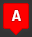
<style>
.page{position:relative;width:32px;height:37px;background:#ff0000}
.page>*{position:absolute;margin:0}
.t1{font:14.6px "Barlow-Bold";color:#ffffff}
</style>
<div class="page">
<p class="t1" style="left:11px;top:10px;width:10px;height:11px">A</p>
</div>
